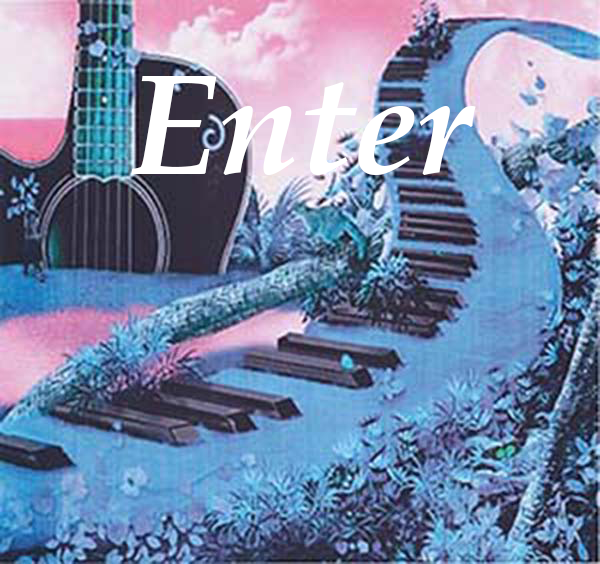
<style>
.page{position:relative;width:600px;height:564px}
.page>*{position:absolute;margin:0}
.t1{font:141.7px "BookAntiqua-BoldItalic";color:#ffffff}
</style>
<div class="page">
<p class="t1" style="left:131px;top:76px;width:345px;height:99px">Enter</p>
</div>
